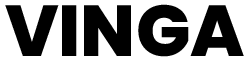
<style>
.page{position:relative;width:250px;height:60px;background:#ffffff}
.page>*{position:absolute;margin:0}
.t1{font:72px "Poppins-ExtraBold";color:#000000}
</style>
<div class="page">
<p class="t1" style="left:5px;top:4px;width:239px;height:53px">VINGA</p>
</div>
